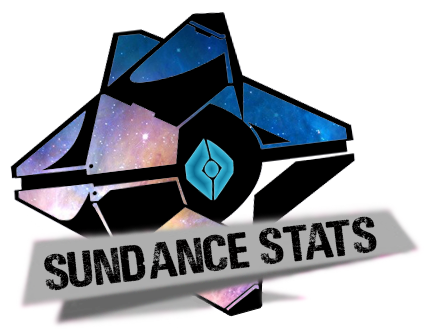
<style>
.page{position:relative;width:426px;height:333px;background:#ffffff}
.page>*{position:absolute;margin:0}
.t1{font:58.3px "LOUDANDCLEARPERSONALUSE";color:#010000}
</style>
<div class="page">
<p class="t1" style="left:44px;top:216px;width:333px;height:75px;rotate:-7deg">Sundance Stats</p>
</div>
